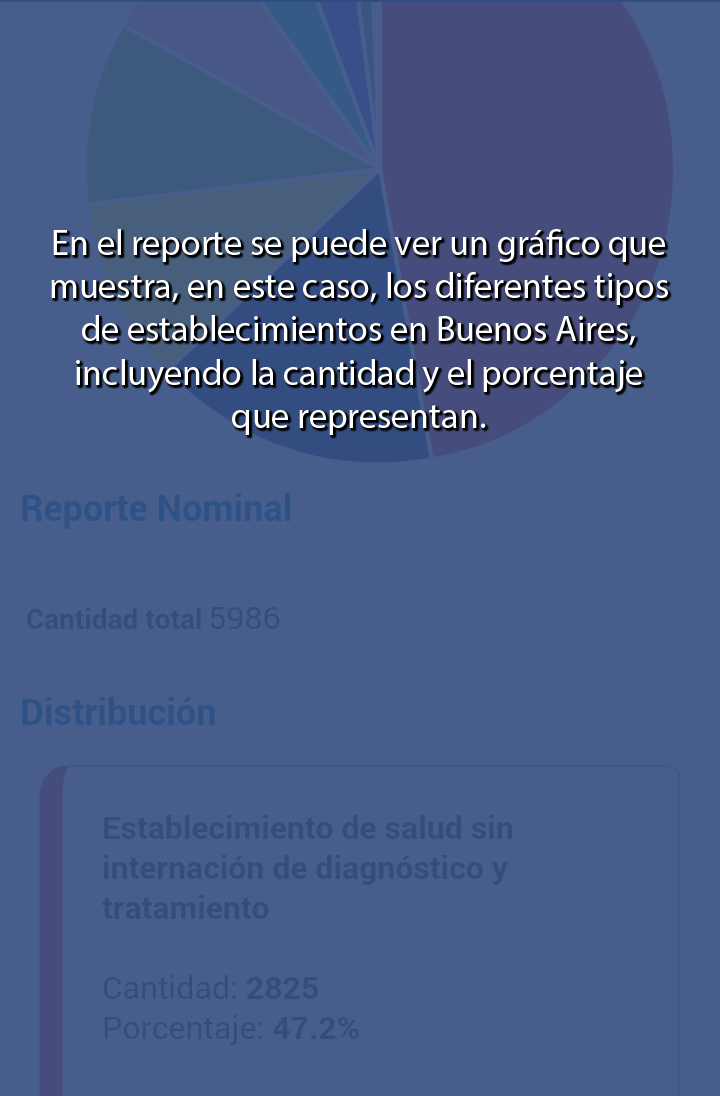
<style>
.page{position:relative;width:720px;height:1096px;background:#475e8c}
.page>*{position:absolute;margin:0}
.t1{font:36px "MyriadPro-Regular";color:#ffffff}
</style>
<div class="page">
<p class="t1" style="left:51px;top:229px;width:617px;height:206px;text-align:center">En el reporte se puede ver un gráfico que<br>muestra, en este caso, los diferentes tipos<br>de establecimientos en Buenos Aires,<br>incluyendo la cantidad y el porcentaje<br>que representan.</p>
</div>
